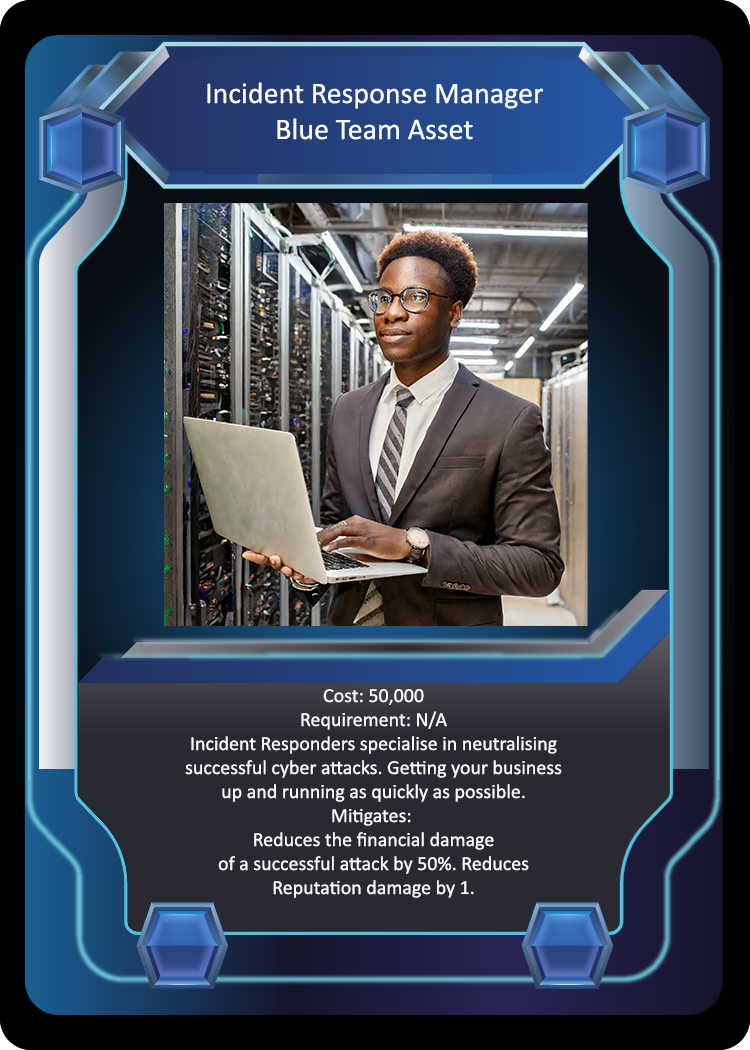
<style>
.page{position:relative;width:750px;height:1050px}
.page>*{position:absolute;margin:0}
.t1{font:30px "Calibri";color:#fcfbfb}
.t2{font:20px "Calibri";color:#fcfbfb}
</style>
<div class="page">
<p class="t1" style="left:207px;top:82px;width:336px;height:58px;text-align:center">Incident Response Manager<br>Blue Team Asset</p>
<p class="t2" style="left:185px;top:689px;width:377px;height:209px;text-align:center">Cost: 50,000<br>Requirement: N/A<br>Incident Responders specialise in neutralising<br>successful cyber attacks. Getting your business<br>up and running as quickly as possible.<br>Mitigates: <br>Reduces the financial damage<br>of a successful attack by 50%. Reduces<br>Reputation damage by 1.</p>
</div>
